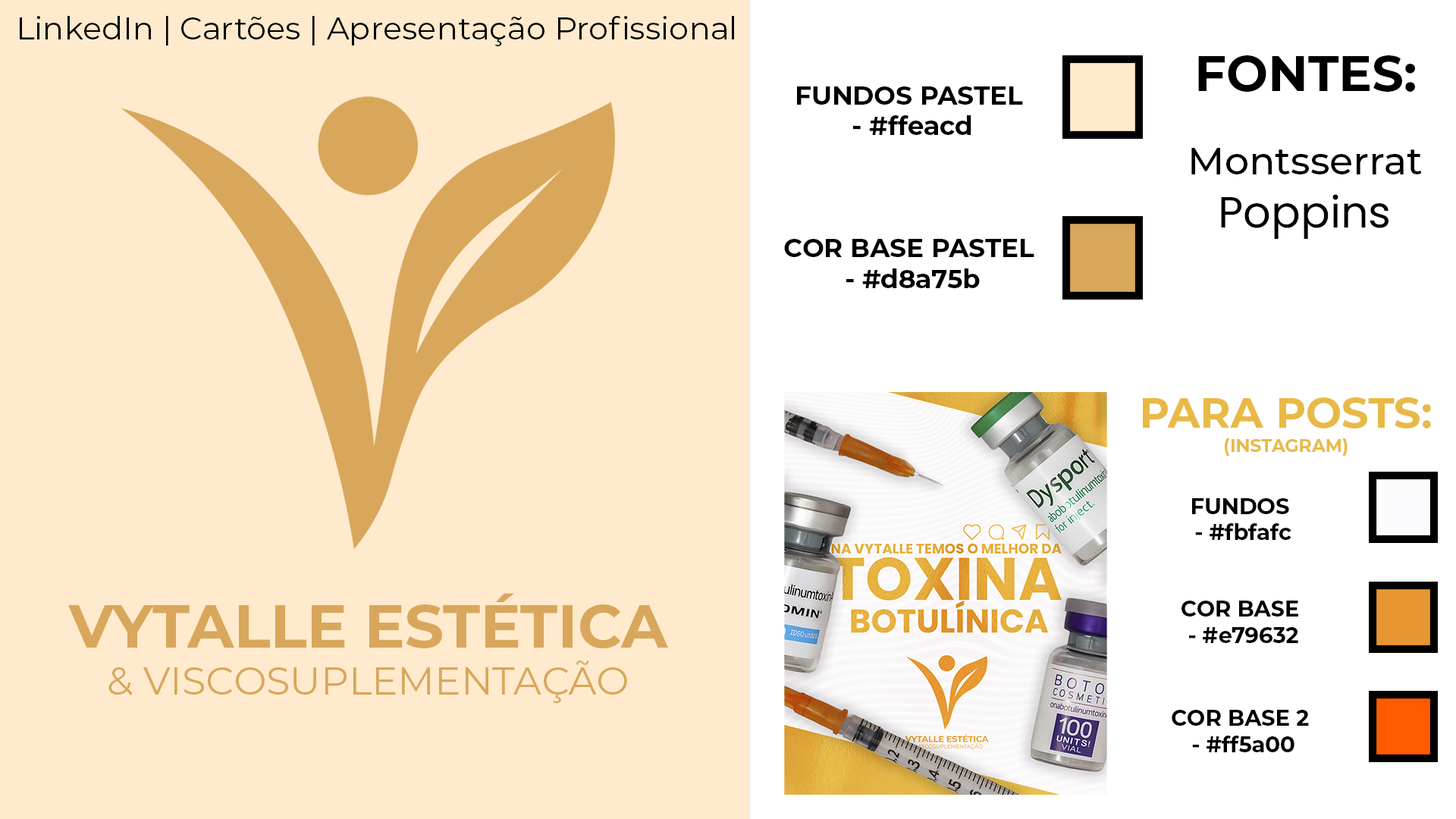
<style>
.page{position:relative;width:1456px;height:819px;background:#ffeacd}
.page>*{position:absolute;margin:0}
.t1{font:31.6px "Montserrat-Regular";color:#000000}
.t2{font:49.7px "Montserrat-Bold";color:#000000}
.t3{font:25.9px "Montserrat-Bold";color:#000000}
.t4{font:38.5px "Montserrat-Medium";color:#000000}
.t5{font:43.5px "Poppins-Regular";color:#000000}
.t6{font:42.2px "Montserrat-Bold";color:#e9b946}
.t7{font:17.7px "Montserrat-Bold";color:#e9b946}
.t8{font:21.9px "Montserrat-Bold";color:#000000}
.t9{font:39px "Montserrat-Regular";color:#d8a75b}
.t10{font:60.3px "Montserrat-Bold";color:#d8a75b}
</style>
<div class="page">
<p class="t1" style="left:20px;top:16px;width:714px;height:30px">LinkedIn | Cartões | Apresentação Profissional</p>
<p class="t2" style="left:1198px;top:55px;width:217px;height:37px">FONTES:</p>
<p class="t3" style="left:797px;top:86px;width:226px;height:49px;text-align:center">FUNDOS PASTEL<br> - #ffeacd</p>
<p class="t4" style="left:1191px;top:148px;width:231px;height:26px">Montsserrat</p>
<p class="t5" style="left:1221px;top:194px;width:167px;height:45px">Poppins</p>
<p class="t3" style="left:784px;top:239px;width:250px;height:49px;text-align:center">COR BASE PASTEL<br> - #d8a75b</p>
<p class="t6" style="left:1143px;top:397px;width:288px;height:31px">PARA POSTS:</p>
<p class="t7" style="left:1225px;top:438px;width:123px;height:18px">(INSTAGRAM)</p>
<p class="t8" style="left:1192px;top:498px;width:99px;height:42px;text-align:center">FUNDOS<br> - #fbfafc</p>
<p class="t9" style="left:68px;top:593px;width:600px;height:111px;text-align:center"><span class="t10">VYTALLE ESTÉTICA<br></span>&amp; VISCOSUPLEMENTAÇÃO</p>
<p class="t8" style="left:1181px;top:601px;width:117px;height:42px;text-align:center">COR BASE<br> - #e79632</p>
<p class="t8" style="left:1172px;top:710px;width:137px;height:42px;text-align:center">COR BASE 2<br> - #ff5a00</p>
</div>
